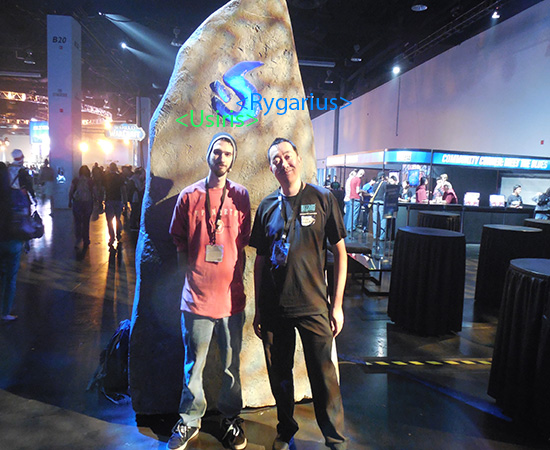
<style>
.page{position:relative;width:550px;height:450px}
.page>*{position:absolute;margin:0}
.t1{font:25px "MyriadPro-Regular";color:#008aff}
.t2{font:25px "MyriadPro-Regular";color:#21f266}
</style>
<div class="page">
<p class="t1" style="left:236px;top:93px;width:116px;height:23px">&lt;Rygarius&gt;</p>
<p class="t2" style="left:176px;top:110px;width:82px;height:17px">&lt;Usiris&gt;</p>
</div>
